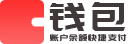
<style>
.page{position:relative;width:130px;height:44px;background:#ffffff}
.page>*{position:absolute;margin:0}
.t1{font:40px "PangMenZhengDao";letter-spacing:0.1em;color:#3f3a39}
.t2{font:9.3px "PangMenZhengDao";letter-spacing:0.1em;color:#3f3a39}
</style>
<div class="page">
<p class="t1" style="left:49px;top:2px;width:76px;height:29px">钱包</p>
<p class="t2" style="left:50px;top:34px;width:77px;height:8px">账户余额快捷支付</p>
</div>
